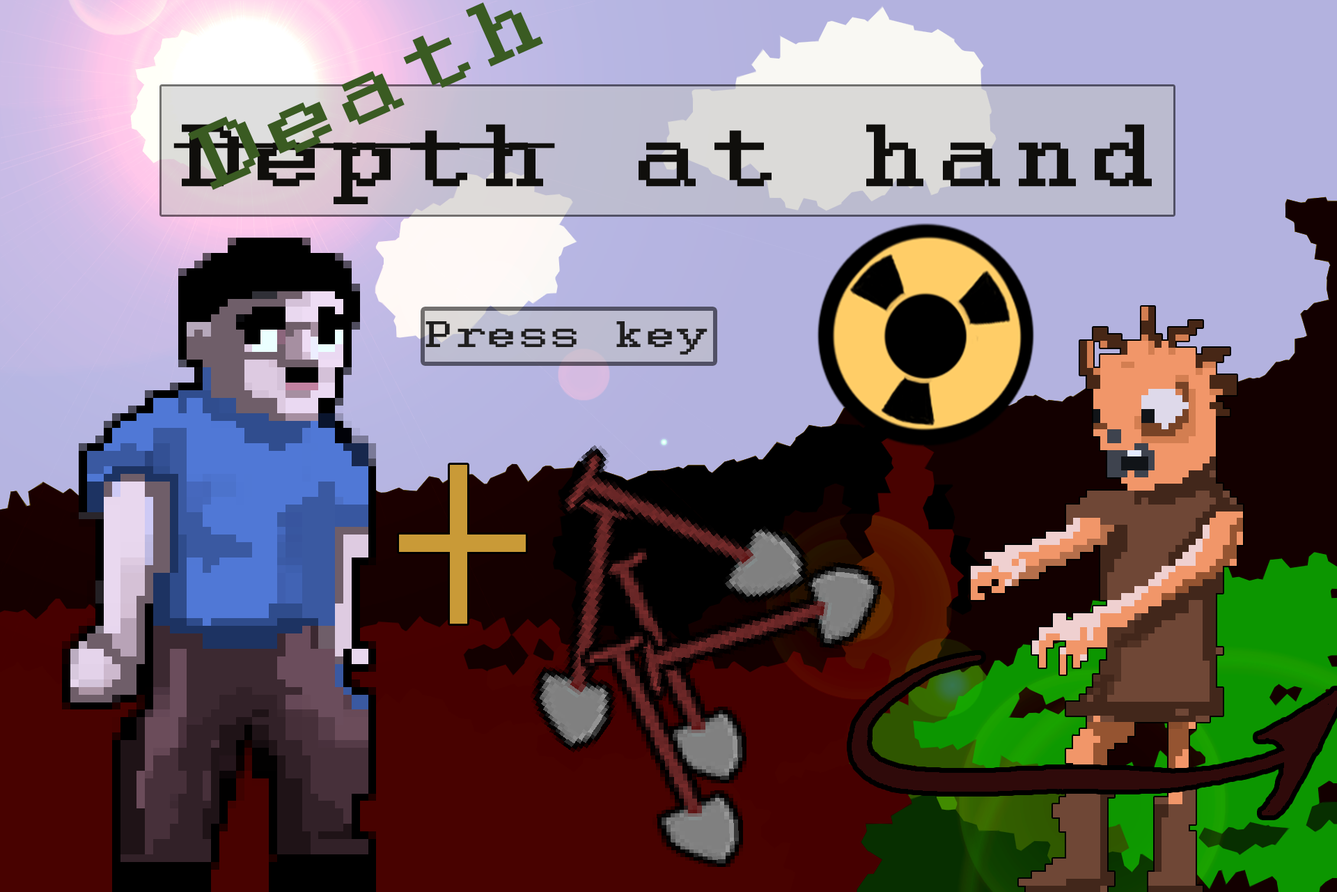
<style>
.page{position:relative;width:1337px;height:892px}
.page>*{position:absolute;margin:0}
.t1{font:96.3px "Courier";letter-spacing:0.06em;color:#3a5b22;font-weight:bold;scale:1.27 1}
.t2{font:96.3px "Courier";letter-spacing:0.06em;color:#100f0c;font-weight:bold;scale:1.27 1}
.t3{font:40.2px "Courier";letter-spacing:0.06em;color:#201f1f;font-weight:bold;scale:1.27 1}
</style>
<div class="page">
<p class="t1" style="left:188px;top:2px;width:355px;height:188px;rotate:-24deg">Death</p>
<p class="t2" style="left:173px;top:124px;width:979px;height:80px">Depth at hand</p>
<p class="t3" style="left:426px;top:321px;width:282px;height:34px">Press key</p>
</div>
